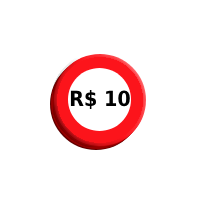
<style>
.page{position:relative;width:200px;height:200px;background:#ffffff}
.page>*{position:absolute;margin:0}
.t1{font:21px "DejaVuSans-Bold";color:#000000;scale:0.91 1}
</style>
<div class="page">
<p class="t1" style="left:70px;top:90px;width:60px;height:20px">R$ 10</p>
</div>
